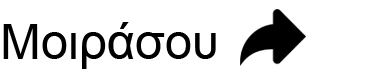
<style>
.page{position:relative;width:380px;height:75px;background:#ffffff}
.page>*{position:absolute;margin:0}
.t1{font:49.1px "ArialMT";color:#000000}
</style>
<div class="page">
<p class="t1" style="left:3px;top:22px;width:213px;height:47px">Μοιράσου</p>
</div>
